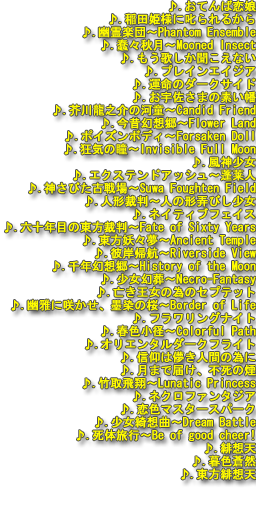
<style>
.page{position:relative;width:256px;height:512px;background:#ffffff}
.page>*{position:absolute;margin:0}
.t1{font:12px/13px "MS-Gothic";color:#fffc00;font-weight:bold;scale:0.97 1}
</style>
<div class="page">
<p class="t1" style="left:5px;top:0px;width:251px;height:480px;text-align:right">♪.おてんば恋娘<br>♪.稲田姫様に叱られるから<br>♪.幽霊楽団～Phantom Ensemble<br>♪.蠢々秋月～Mooned Insect<br>♪.もう歌しか聞こえない<br>♪.プレインエイジア<br>♪.運命のダークサイド<br>♪.お宇佐さまの素い幡<br>♪.芥川龍之介の河童～Candid Friend<br>♪.今昔幻想郷～Flower Land<br>♪.ポイズンボディ～Forsaken Doll<br>♪.狂気の瞳～Invisible Full Moon<br>♪.風神少女<br>♪.エクステンドアッシュ～蓬莱人<br>♪.神さびた古戦場～Suwa Foughten Field<br>♪.人形裁判～人の形弄びし少女<br>♪.ネイティブフェイス<br>♪.六十年目の東方裁判～Fate of Sixty Years<br>♪.東方妖々夢～Ancient Temple<br>♪.彼岸帰航～Riverside View<br>♪.千年幻想郷～History of the Moon<br>♪.少女幻葬～Necro-Fantasy<br>♪.亡き王女の為のセプテット<br>♪.幽雅に咲かせ、墨染の桜～Border of Life<br>♪.フラワリングナイト<br>♪.春色小径～Colorful Path<br>♪.オリエンタルダークフライト<br>♪.信仰は儚き人間の為に<br>♪.月まで届け、不死の煙<br>♪.竹取飛翔～Lunatic Princess<br>♪.ネクロファンタジア<br>♪.恋色マスタースパーク<br>♪.少女綺想曲～Dream Battle<br>♪.死体旅行～Be of good cheer!<br>♪.緋想天<br>♪.暮色蒼然<br>♪.東方緋想天</p>
</div>
